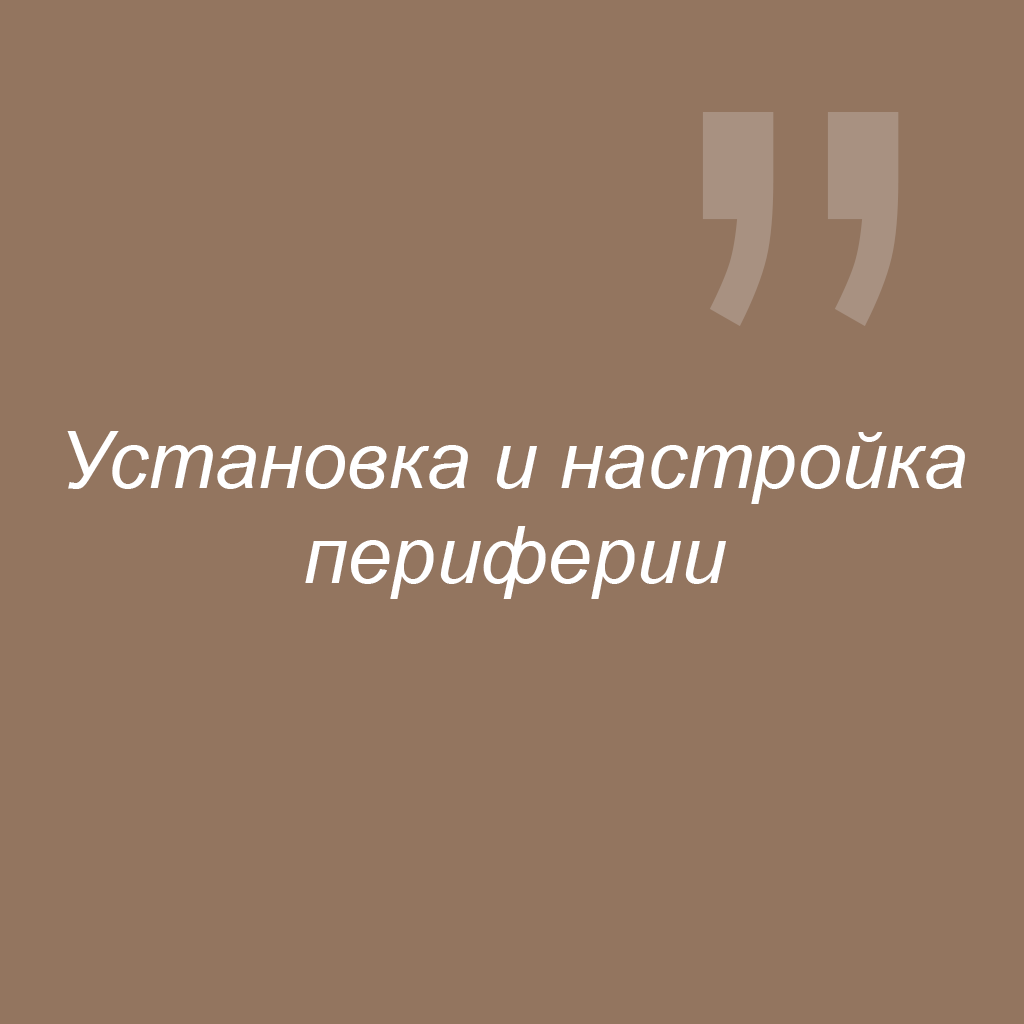
<style>
.page{position:relative;width:1024px;height:1024px;background:#93755f}
.page>*{position:absolute;margin:0}
.t1{font:796.4px "CenturyGothic";color:#a89181}
.t2{font:79.2px "Arial-ItalicMT";color:#ffffff}
</style>
<div class="page">
<p class="t1" style="left:702px;top:112px;width:72px;height:214px">’</p>
<p class="t1" style="left:827px;top:112px;width:72px;height:214px">’</p>
<p class="t2" style="left:67px;top:431px;width:898px;height:168px;text-align:center">Установка и настройка<br>периферии</p>
</div>
